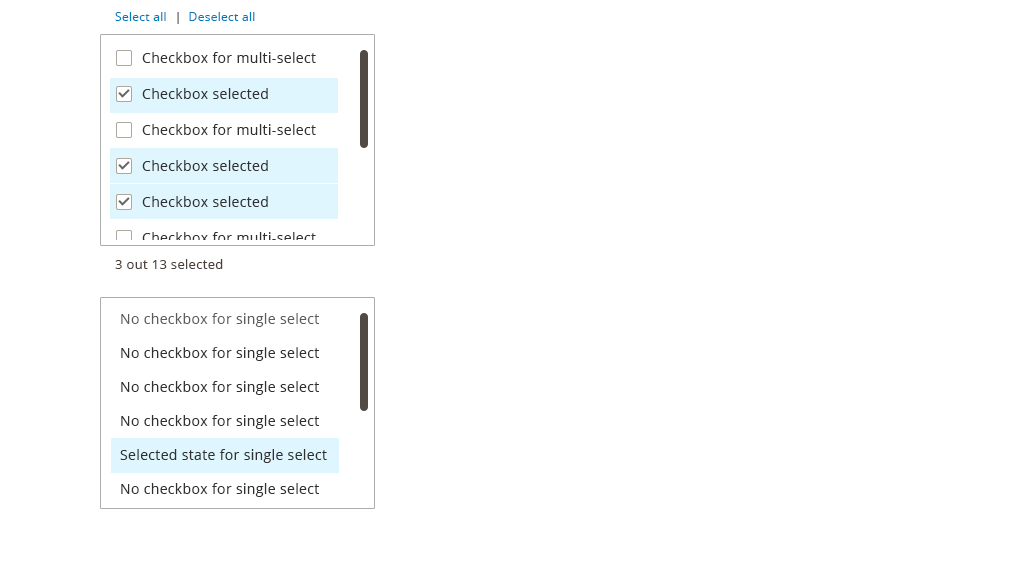
<style>
.page{position:relative;width:1024px;height:571px;background:#ffffff}
.page>*{position:absolute;margin:0}
.t1{font:12px "OpenSans";letter-spacing:0.025em;color:#007dbd}
.t2{font:12px "OpenSans";letter-spacing:0.025em;color:#111213}
.t3{font:14px "OpenSans";letter-spacing:0.025em;color:#303030}
.t4{font:13px "OpenSans";letter-spacing:0.025em;color:#4b4039}
.t5{font:14px/34px "OpenSans";letter-spacing:0.025em;color:#303030}
</style>
<div class="page">
<p class="t1" style="left:115px;top:12px;width:51px;height:9px">Select all</p>
<p class="t1" style="left:177px;top:12px;width:78px;height:12px"><span class="t2">|  </span>Deselect all</p>
<p class="t3" style="left:142px;top:52px;width:174px;height:11px">Checkbox for multi-select</p>
<p class="t3" style="left:142px;top:88px;width:126px;height:11px">Checkbox selected</p>
<p class="t3" style="left:142px;top:124px;width:174px;height:11px">Checkbox for multi-select</p>
<p class="t3" style="left:142px;top:160px;width:126px;height:11px">Checkbox selected</p>
<p class="t3" style="left:142px;top:196px;width:126px;height:11px">Checkbox selected</p>
<p class="t3" style="left:142px;top:232px;width:174px;height:11px">Checkbox for multi-select</p>
<p class="t4" style="left:115px;top:259px;width:108px;height:10px">3 out 13 selected</p>
<p class="t5" style="left:120px;top:313px;width:207px;height:218px">No checkbox for single select<br>No checkbox for single select<br>No checkbox for single select<br>No checkbox for single select<br>Selected state for single select<br>No checkbox for single select<br>No checkbox for single select</p>
</div>
